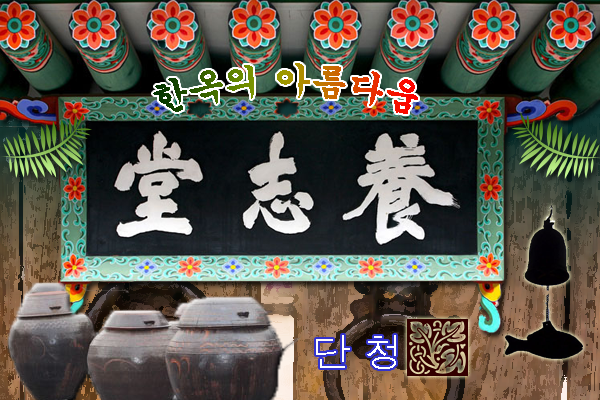
<style>
.page{position:relative;width:600px;height:400px}
.page>*{position:absolute;margin:0}
.t1{font:35px "Gungsuh"}
.t2{font:40px "Dotum";color:#ffffff}
</style>
<div class="page">
<p class="t1" style="left:153px;top:63px;width:265px;height:51px">한옥의 아름다움</p>
<p class="t2" style="left:316px;top:335px;width:80px;height:34px">단 청</p>
</div>
